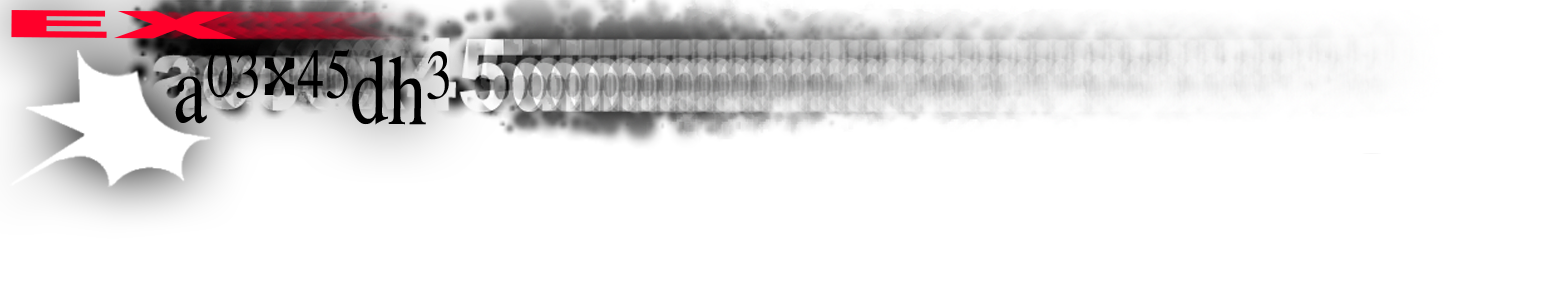
<style>
.page{position:relative;width:1550px;height:307px;background:#ffffff}
.page>*{position:absolute;margin:0}
.t1{font:37.8px "Arial-Black";color:#ff002a;scale:4.16 1}
.t2{font:99.9px "OpusChords";color:#000000;scale:0.77 1}
</style>
<div class="page">
<p class="t1" style="left:11px;top:10px;width:226px;height:29px">EX</p>
<p class="t2" style="left:175px;top:48px;width:274px;height:77px">a03x45dh3</p>
</div>
